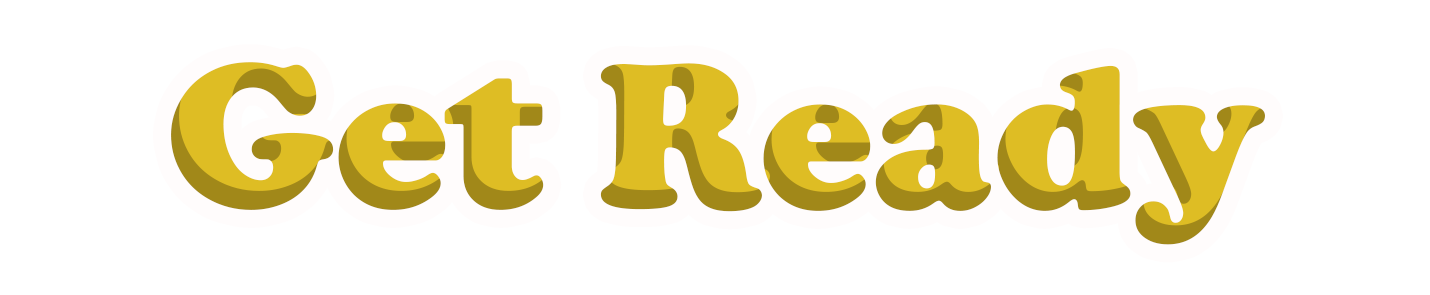
<style>
.page{position:relative;width:1430px;height:295px;background:#ffffff}
.page>*{position:absolute;margin:0}
.t1{font:213px "CooperBlack";color:#debd24}
</style>
<div class="page">
<p class="t1" style="left:171px;top:62px;width:1094px;height:183px">Get Ready</p>
</div>
